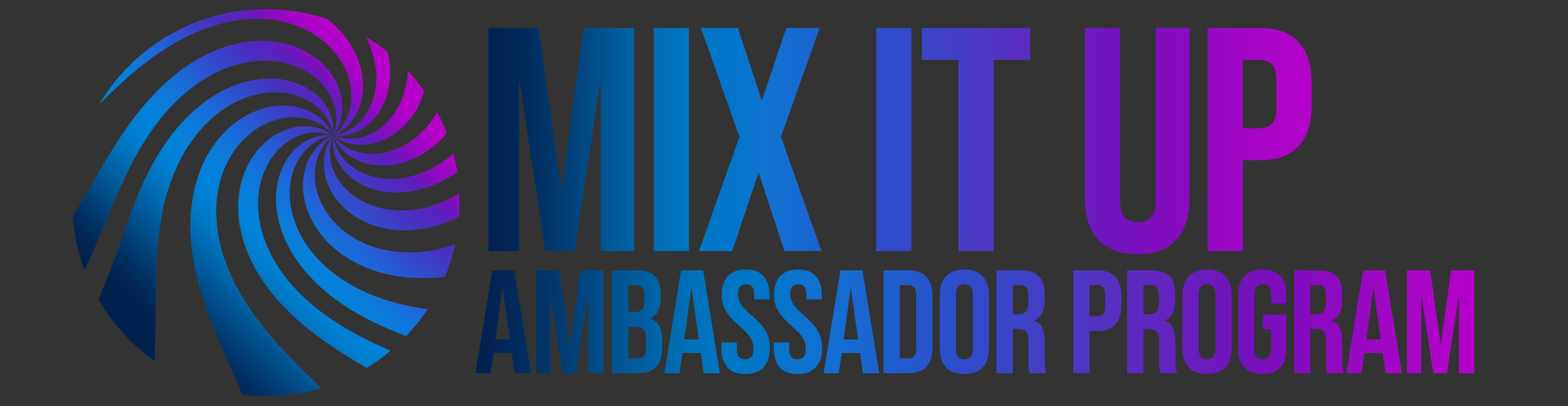
<style>
.page{position:relative;width:1568px;height:406px;background:#333333}
.page>*{position:absolute;margin:0}
.t1{font:318.9px "BebasNeue-Regular";letter-spacing:-0.02em}
.t2{font:147.2px "BebasNeue-Regular";letter-spacing:-0.02em}
</style>
<div class="page">
<p class="t1" style="left:488px;top:28px;width:824px;height:227px">Mix It Up</p>
<p class="t2" style="left:475px;top:270px;width:999px;height:104px">Ambassador Program</p>
</div>
